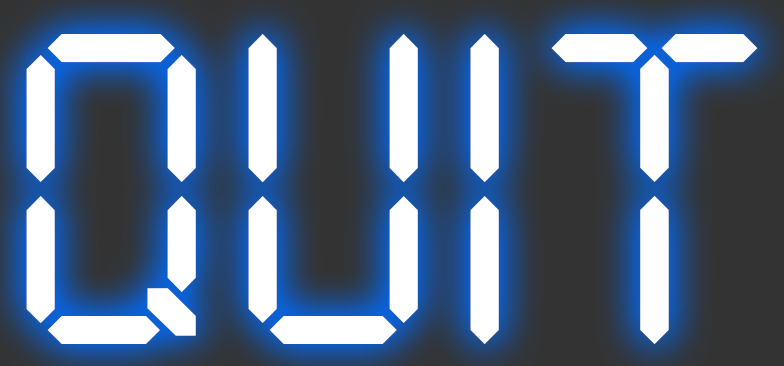
<style>
.page{position:relative;width:784px;height:366px;background:#ffffff}
.page>*{position:absolute;margin:0}
.t1{font:442.6px "SevenSegmentRegular";color:#ffffff}
</style>
<div class="page">
<p class="t1" style="left:26px;top:34px;width:732px;height:310px">quit</p>
</div>
